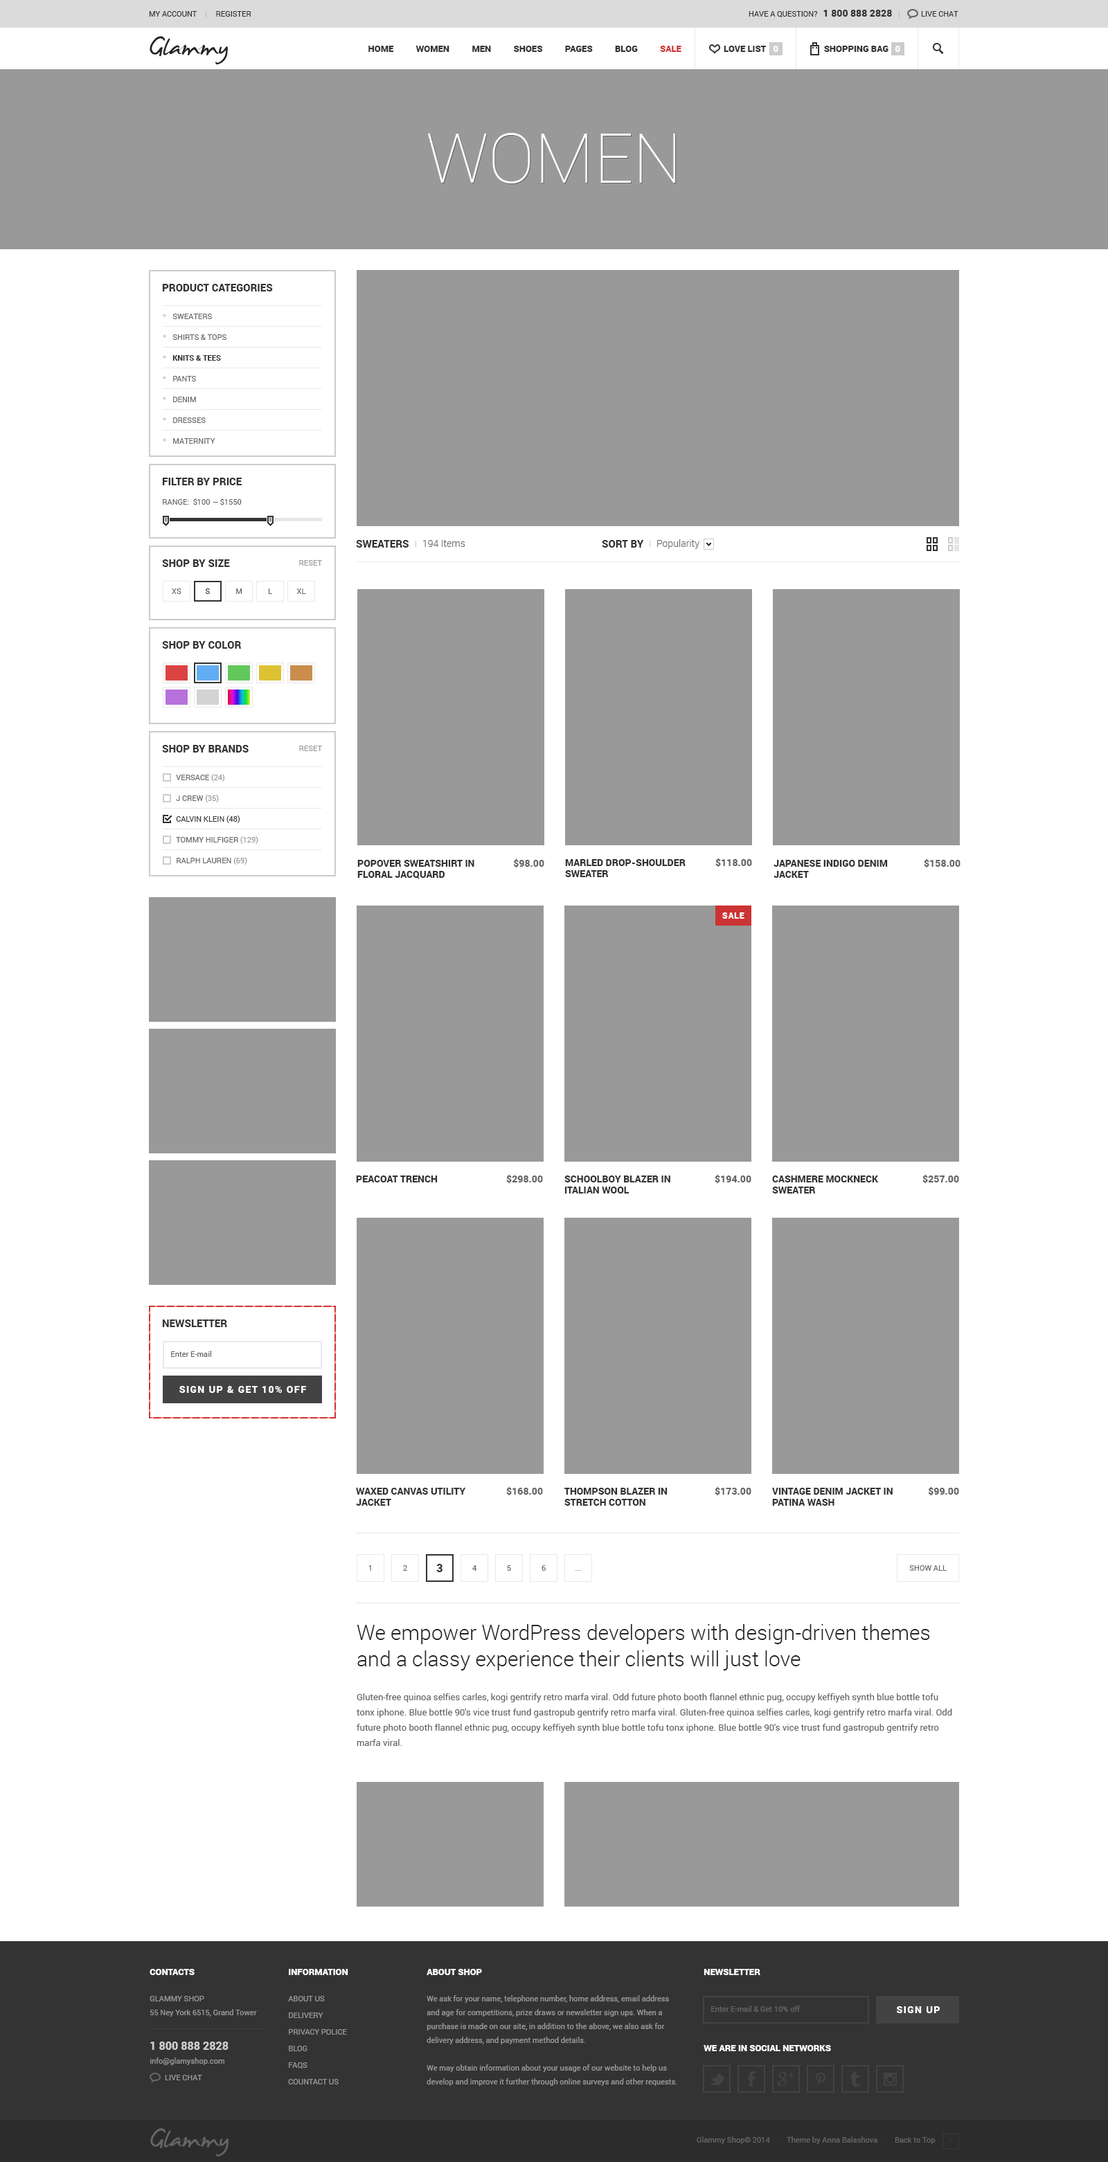
<style>
.page{position:relative;width:1108px;height:2162px;background:#ffffff}
.page>*{position:absolute;margin:0}
.t1{font:7.6px "Roboto-Regular";color:#333333;text-transform:uppercase}
.t2{font:9.7px "Roboto-Black";color:#333333;text-transform:uppercase}
.t3{font:41.5px "JamesFajardo";color:#242424}
.t4{font:9px "Roboto-Black";color:#333333;text-transform:uppercase}
.t5{font:9px "Roboto-Black";color:#cc3333;text-transform:uppercase}
.t6{font:9px "Roboto-Black";color:#ffffff;text-transform:uppercase}
.t7{font:69.2px "Roboto-Thin";color:#ffffff;text-transform:uppercase}
.t8{font:10.4px "Roboto-Black";color:#333333;text-transform:uppercase}
.t9{font:7.6px/20.8px "Roboto-Regular";color:#666666;text-transform:uppercase}
.t10{font:7.6px/20.8px "Roboto-Black";color:#333333;text-transform:uppercase}
.t11{font:7.6px "Roboto-Regular";color:#666666;text-transform:uppercase}
.t12{font:9.7px "Roboto-Light";color:#666666}
.t13{font:7.6px "Roboto-Regular";color:#999999;text-transform:uppercase}
.t14{font:7.6px/20.8px "Roboto-Regular";color:#333333;text-transform:uppercase}
.t15{font:7.6px/20.8px "Roboto-Regular";color:#999999;text-transform:uppercase}
.t16{font:9.7px "Roboto-Black";color:#666666}
.t17{font:9.7px "Roboto-Black";color:#333333}
.t18{font:8.3px "Roboto-Black";letter-spacing:0.08em;color:#ffffff;text-transform:uppercase}
.t19{font:7.6px "Roboto-Regular";color:#666666}
.t20{font:9.7px "Roboto-Black";letter-spacing:0.1em;color:#ffffff;text-transform:uppercase}
.t21{font:11.1px "Roboto-Black";color:#333333;text-transform:uppercase}
.t22{font:7.6px "Roboto-Regular";text-transform:uppercase}
.t23{font:20.8px/26.3px "Roboto-Light";color:#242424}
.t24{font:9px/15.2px "Roboto-Regular";color:#666666}
.t25{font:7.6px/13.8px "Roboto-Regular";color:#999999}
.t26{font:7.6px/16.6px "Roboto-Regular";color:#999999;text-transform:uppercase}
.t27{font:11.1px/34.6px "Roboto-Black";color:#cccccc}
.t28{font:7.6px "Roboto-Regular";color:#333333}
</style>
<div class="page">
<p class="t1" style="left:149px;top:11px;width:102px;height:6px">MY ACCOUNT          Register</p>
<p class="t1" style="left:748px;top:10px;width:144px;height:7px">HAVE A QUESTION?   <span class="t2">1 800 888 2828</span></p>
<p class="t1" style="left:921px;top:11px;width:37px;height:6px">Live chat</p>
<p class="t3" style="left:150px;top:36px;width:78px;height:28px">Glammy</p>
<p class="t4" style="left:368px;top:46px;width:313px;height:6px">Home          women          men          shoes          pages          Blog          <span class="t5">sale</span></p>
<p class="t4" style="left:723px;top:46px;width:43px;height:6px">Love list</p>
<p class="t6" style="left:773px;top:46px;width:5px;height:6px">0</p>
<p class="t4" style="left:824px;top:46px;width:64px;height:6px">shopping bag</p>
<p class="t6" style="left:894px;top:46px;width:6px;height:6px">0</p>
<p class="t7" style="left:428px;top:133px;width:247px;height:50px">Women</p>
<p class="t8" style="left:162px;top:284px;width:111px;height:7px">PRODUCT CATEGORIES</p>
<p class="t9" style="left:172px;top:314px;width:54px;height:130px">SWEATERS<br>SHIRTS &amp; TOPS<br><span class="t10">KNITS &amp; TEES<br></span>PANTS<br>DENIM<br>DRESSES<br>MATERNITY</p>
<p class="t8" style="left:162px;top:478px;width:80px;height:7px">FILTER BY PRICE</p>
<p class="t11" style="left:163px;top:498px;width:79px;height:7px">Range:  $100 — $1550</p>
<p class="t8" style="left:356px;top:540px;width:52px;height:8px">Sweaters</p>
<p class="t12" style="left:423px;top:540px;width:42px;height:7px">194 Items</p>
<p class="t8" style="left:602px;top:540px;width:42px;height:8px">SORT BY</p>
<p class="t12" style="left:657px;top:539px;width:42px;height:10px">Popularity</p>
<p class="t8" style="left:162px;top:559px;width:68px;height:8px">SHOP BY SIZE</p>
<p class="t13" style="left:299px;top:560px;width:23px;height:6px">RESET</p>
<p class="t11" style="left:172px;top:588px;width:9px;height:6px">XS</p>
<p class="t1" style="left:205px;top:588px;width:5px;height:6px">s</p>
<p class="t11" style="left:236px;top:588px;width:6px;height:6px">m</p>
<p class="t11" style="left:268px;top:588px;width:4px;height:6px">L</p>
<p class="t11" style="left:296px;top:588px;width:10px;height:6px">XL</p>
<p class="t8" style="left:162px;top:641px;width:80px;height:8px">SHOP BY color</p>
<p class="t8" style="left:162px;top:745px;width:87px;height:8px">SHOP BY BRANDS</p>
<p class="t13" style="left:299px;top:746px;width:23px;height:5px">RESET</p>
<p class="t14" style="left:176px;top:774px;width:82px;height:91px"><span class="t9">VERSACE</span><span class="t15"> (24)<br></span><span class="t9">J CREW</span><span class="t15"> (35)<br></span>Calvin KlEin (48)<br><span class="t9">Tommy hilfiger </span><span class="t15">(129)<br></span><span class="t9">Ralph Lauren </span><span class="t15">(69)</span></p>
<p class="t16" style="left:715px;top:858px;width:37px;height:9px">$118.00</p>
<p class="t17" style="left:357px;top:860px;width:117px;height:19px">POPOVER SWEATSHIRT IN FLORAL JACQUARD</p>
<p class="t16" style="left:513px;top:858px;width:31px;height:10px">$98.00</p>
<p class="t17" style="left:565px;top:859px;width:120px;height:18px">MARLED DROP-SHOULDER SWEATER</p>
<p class="t17" style="left:773px;top:860px;width:115px;height:18px">JAPANESE INDIGO DENIM JACKET</p>
<p class="t16" style="left:924px;top:858px;width:36px;height:10px">$158.00</p>
<p class="t18" style="left:722px;top:912px;width:22px;height:7px">SALE</p>
<p class="t17" style="left:356px;top:1176px;width:82px;height:6px">PEACOAT TRENCH</p>
<p class="t16" style="left:506px;top:1174px;width:37px;height:10px">$298.00</p>
<p class="t17" style="left:564px;top:1176px;width:106px;height:18px">SCHOOLBOY BLAZER IN ITALIAN WOOL</p>
<p class="t16" style="left:714px;top:1174px;width:37px;height:10px">$194.00</p>
<p class="t17" style="left:772px;top:1176px;width:107px;height:18px">CASHMERE MOCKNECK SWEATER</p>
<p class="t16" style="left:922px;top:1174px;width:37px;height:10px">$257.00</p>
<p class="t8" style="left:162px;top:1320px;width:65px;height:7px">NEWSLETTER</p>
<p class="t19" style="left:171px;top:1351px;width:40px;height:6px">Enter E-mail</p>
<p class="t20" style="left:179px;top:1386px;width:127px;height:7px">SIGN UP &amp; GET 10% OFF</p>
<p class="t17" style="left:356px;top:1488px;width:110px;height:18px">WAXED CANVAS UTILITY JACKET</p>
<p class="t16" style="left:506px;top:1486px;width:37px;height:10px">$168.00</p>
<p class="t17" style="left:564px;top:1488px;width:103px;height:18px">THOMPSON BLAZER IN STRETCH COTTON</p>
<p class="t16" style="left:714px;top:1486px;width:37px;height:10px">$173.00</p>
<p class="t17" style="left:772px;top:1488px;width:120px;height:18px">VINTAGE DENIM JACKET IN PATINA WASH</p>
<p class="t16" style="left:928px;top:1486px;width:31px;height:10px">$99.00</p>
<p class="t11" style="left:368px;top:1565px;width:3px;height:6px">1</p>
<p class="t11" style="left:403px;top:1565px;width:4px;height:6px">2</p>
<p class="t21" style="left:436px;top:1564px;width:6px;height:8px">3</p>
<p class="t11" style="left:472px;top:1565px;width:5px;height:6px">4</p>
<p class="t11" style="left:507px;top:1565px;width:4px;height:6px">5</p>
<p class="t11" style="left:541px;top:1565px;width:5px;height:6px">6</p>
<p class="t11" style="left:909px;top:1565px;width:37px;height:6px">show all</p>
<p class="t22" style="left:575px;top:1570px;width:6px;height:1px">...</p>
<p class="t23" style="left:357px;top:1624px;width:573px;height:47px">We empower WordPress developers with design-driven themes and a classy experience their clients will just love</p>
<p class="t24" style="left:357px;top:1693px;width:595px;height:53px">Gluten-free quinoa selfies carles, kogi gentrify retro marfa viral. Odd future photo booth flannel ethnic pug, occupy keffiyeh synth blue bottle tofu tonx iphone. Blue bottle 90′s vice trust fund gastropub gentrify retro marfa viral. Gluten-free quinoa selfies carles, kogi gentrify retro marfa viral. Odd future photo booth flannel ethnic pug, occupy keffiyeh synth blue bottle tofu tonx iphone. Blue bottle 90′s vice trust fund gastropub gentrify retro marfa viral.</p>
<p class="t6" style="left:150px;top:1969px;width:45px;height:6px">Contacts</p>
<p class="t6" style="left:289px;top:1969px;width:59px;height:6px">Information</p>
<p class="t6" style="left:426px;top:1969px;width:56px;height:6px">About shop</p>
<p class="t6" style="left:703px;top:1969px;width:57px;height:6px">NEWSLETTER</p>
<p class="t25" style="left:150px;top:1996px;width:107px;height:84px"><span class="t26">Glammy Shop<br></span>55 Ney York 6515, Grand Tower<br><span class="t27">1 800 888 2828<br></span>info@glamyshop.com<br><span class="t26">        Live chat</span></p>
<p class="t26" style="left:288px;top:1996px;width:59px;height:89px">About us<br>Delivery<br>Privacy police<br>Blog<br>Faqs<br>countact us</p>
<p class="t25" style="left:426px;top:1995px;width:251px;height:91px">We ask for your name, telephone number, home address, email address and age for competitions, prize draws or newsletter sign ups. When a purchase is made on our site, in addition to the above, we also ask for delivery address, and payment method details. <br><br>We may obtain information about your usage of our website to help us develop and improve it further through online surveys and other requests.</p>
<p class="t19" style="left:711px;top:2006px;width:89px;height:6px">Enter E-mail &amp; Get 10% off</p>
<p class="t20" style="left:897px;top:2006px;width:42px;height:7px">SIGN UP</p>
<p class="t6" style="left:703px;top:2045px;width:128px;height:6px">we are in social networks</p>
<p class="t19" style="left:696px;top:2136px;width:239px;height:8px">Glammy Shop© 2014<span class="t28">    |    </span>Theme by Anna Balashova<span class="t28">    |    </span>Back to Top</p>
</div>
